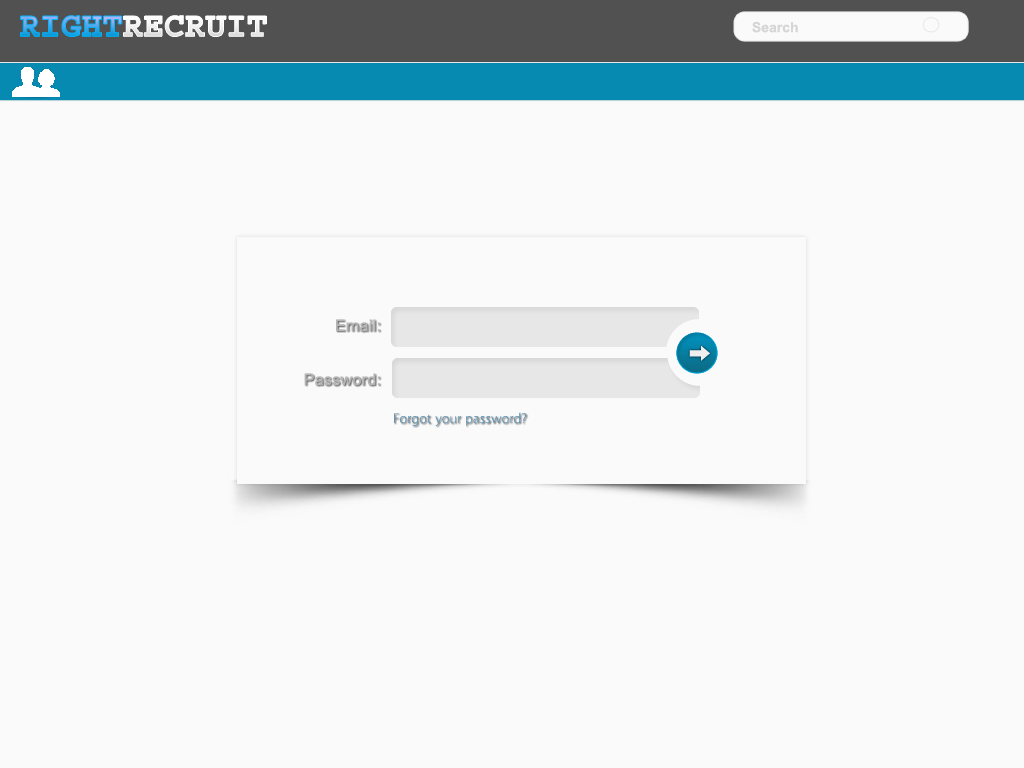
<style>
.page{position:relative;width:1024px;height:768px;background:#fafafa}
.page>*{position:absolute;margin:0}
.t1{font:14px "Arial-BoldMT";color:#d7d6d6}
.t2{font:16px "ArialMT";letter-spacing:0.02em;color:#b5b5b5}
.t3{font:14px "Vegur-Light";letter-spacing:0.02em;color:#6296b4}
</style>
<div class="page">
<p class="t1" style="left:752px;top:21px;width:46px;height:12px">Search</p>
<p class="t2" style="left:304px;top:373px;width:76px;height:13px">Password:</p>
<p class="t3" style="left:394px;top:412px;width:133px;height:14px">Forgot your password?</p>
</div>
